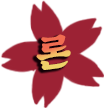
<style>
.page{position:relative;width:104px;height:108px;background:#ffffff}
.page>*{position:absolute;margin:0}
.t1{font:38.3px "SDKukdetopokki-bBd";letter-spacing:0.04em}
</style>
<div class="page">
<p class="t1" style="left:36px;top:34px;width:35px;height:36px;rotate:-8deg">론</p>
</div>
